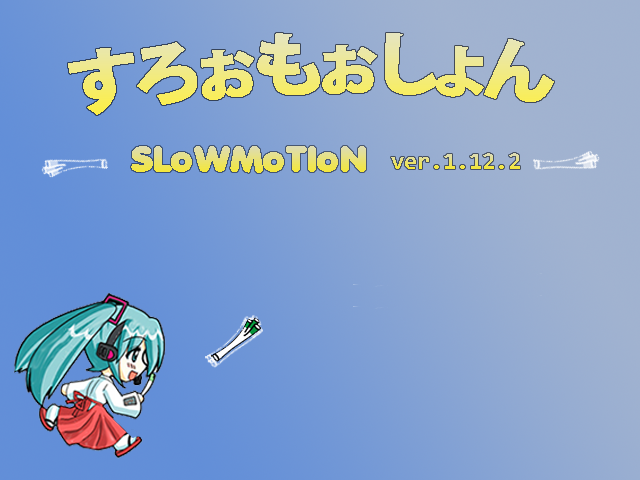
<style>
.page{position:relative;width:640px;height:480px}
.page>*{position:absolute;margin:0}
.t1{font:68.9px "KozGoPr6N-Heavy"}
.t2{font:36px "Valken"}
.t3{font:24px "Consolas-Bold"}
</style>
<div class="page">
<p class="t1" style="left:68px;top:33px;width:486px;height:82px">すろぉもぉしょん</p>
<p class="t2" style="left:131px;top:146px;width:235px;height:27px">SLoWMoTIoN</p>
<p class="t3" style="left:391px;top:153px;width:129px;height:16px">ver.1.12.2</p>
</div>
